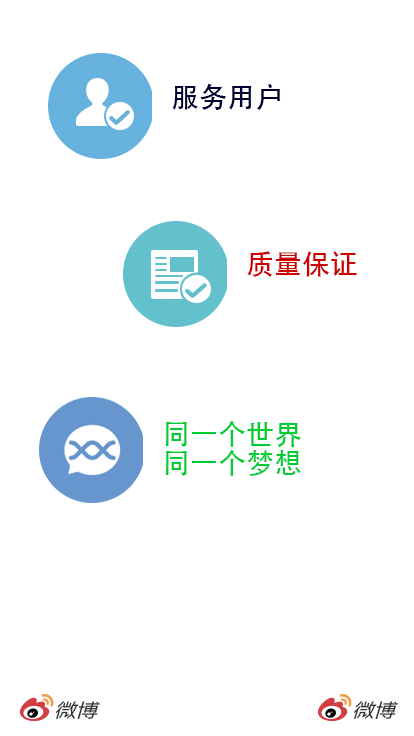
<style>
.page{position:relative;width:414px;height:736px;background:#ffffff}
.page>*{position:absolute;margin:0}
.t1{font:28px "STHeiti";color:#000033}
.t2{font:28px "STHeiti";color:#cc0000}
.t3{font:28px/29px "STHeiti";color:#00cc33}
</style>
<div class="page">
<p class="t1" style="left:172px;top:83px;width:108px;height:27px">服务用户</p>
<p class="t2" style="left:247px;top:251px;width:110px;height:26px">质量保证</p>
<p class="t3" style="left:165px;top:421px;width:136px;height:55px">同一个世界<br>同一个梦想</p>
</div>
